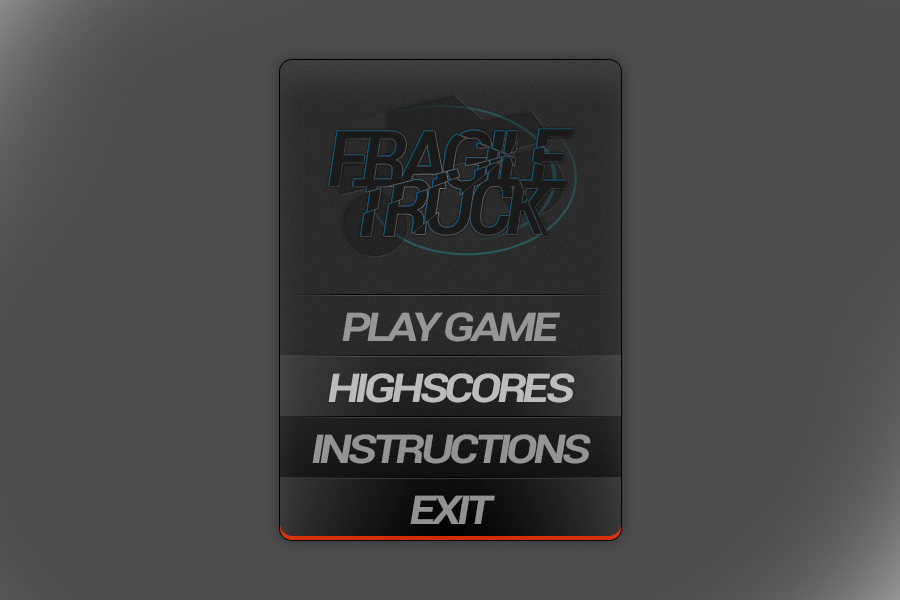
<style>
.page{position:relative;width:900px;height:600px;background:#4d4d4d}
.page>*{position:absolute;margin:0}
.t1{font:49.5px "Roboto-MediumItalic";letter-spacing:-0.1em;color:#969696;font-variant:small-caps;scale:1.08 1}
.t2{font:49.5px "Roboto-MediumItalic";letter-spacing:-0.1em;color:#bcbcbc;font-variant:small-caps;scale:1.08 1}
.t3{font:49.5px "Roboto-MediumItalic";letter-spacing:-0.1em;color:#949494;font-variant:small-caps;scale:1.08 1}
.t4{font:49.5px "Roboto-MediumItalic";letter-spacing:-0.1em;color:#929292;font-variant:small-caps;scale:1.08 1}
</style>
<div class="page">
<p class="t1" style="left:342px;top:312px;width:218px;height:30px">play game</p>
<p class="t2" style="left:328px;top:373px;width:247px;height:30px">HIGHSCORES</p>
<p class="t3" style="left:312px;top:434px;width:279px;height:30px">INSTRUCTIONS</p>
<p class="t4" style="left:410px;top:495px;width:85px;height:29px">EXIT</p>
</div>
